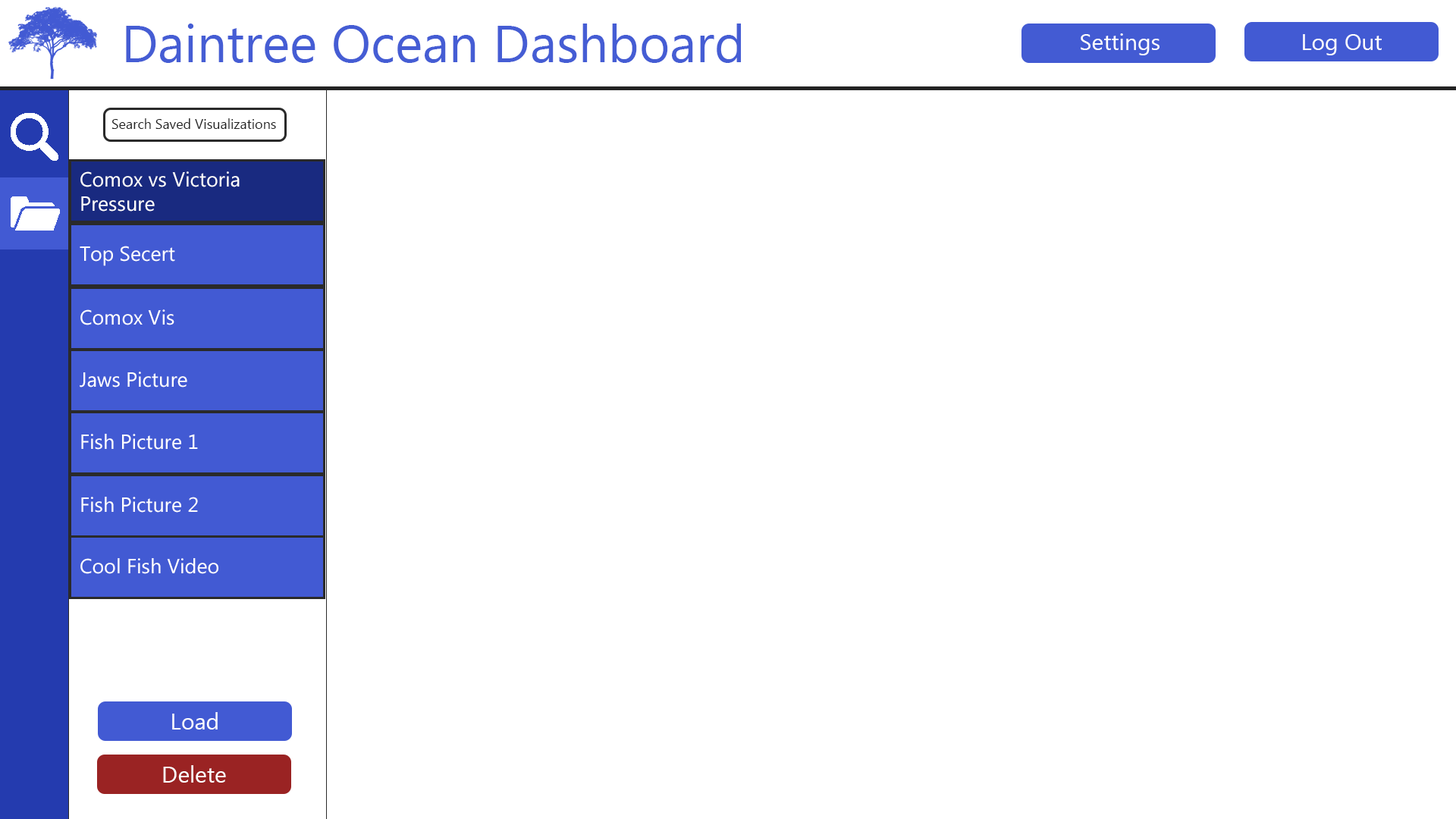
<style>
.page{position:relative;width:1456px;height:819px;background:#ffffff}
.page>*{position:absolute;margin:0}
.t1{font:52.3px "MyanmarText";color:#455dd4}
.t2{font:22.7px "MyanmarText";color:#ffffff}
.t3{font:13.6px "MyanmarText";color:#232323}
.t4{font:20.5px "MyanmarText";color:#ffffff}
</style>
<div class="page">
<p class="t1" style="left:126px;top:24px;width:615px;height:39px">Daintree Ocean Dashboard</p>
<p class="t2" style="left:1081px;top:33px;width:78px;height:22px">Settings</p>
<p class="t2" style="left:1303px;top:34px;width:79px;height:21px">Log Out</p>
<p class="t3" style="left:111px;top:118px;width:165px;height:11px">Search Saved Visualizations</p>
<p class="t4" style="left:80px;top:171px;width:160px;height:41px">Comox vs Victoria <br>Pressure</p>
<p class="t4" style="left:80px;top:246px;width:95px;height:20px">Top Secert</p>
<p class="t4" style="left:80px;top:309px;width:94px;height:16px">Comox Vis</p>
<p class="t4" style="left:80px;top:372px;width:107px;height:16px">Jaws Picture</p>
<p class="t4" style="left:81px;top:434px;width:117px;height:16px">Fish Picture 1</p>
<p class="t4" style="left:81px;top:497px;width:117px;height:16px">Fish Picture 2</p>
<p class="t4" style="left:80px;top:558px;width:138px;height:16px">Cool Fish Video</p>
<p class="t2" style="left:172px;top:712px;width:46px;height:18px">Load</p>
<p class="t2" style="left:163px;top:765px;width:63px;height:18px">Delete</p>
</div>
